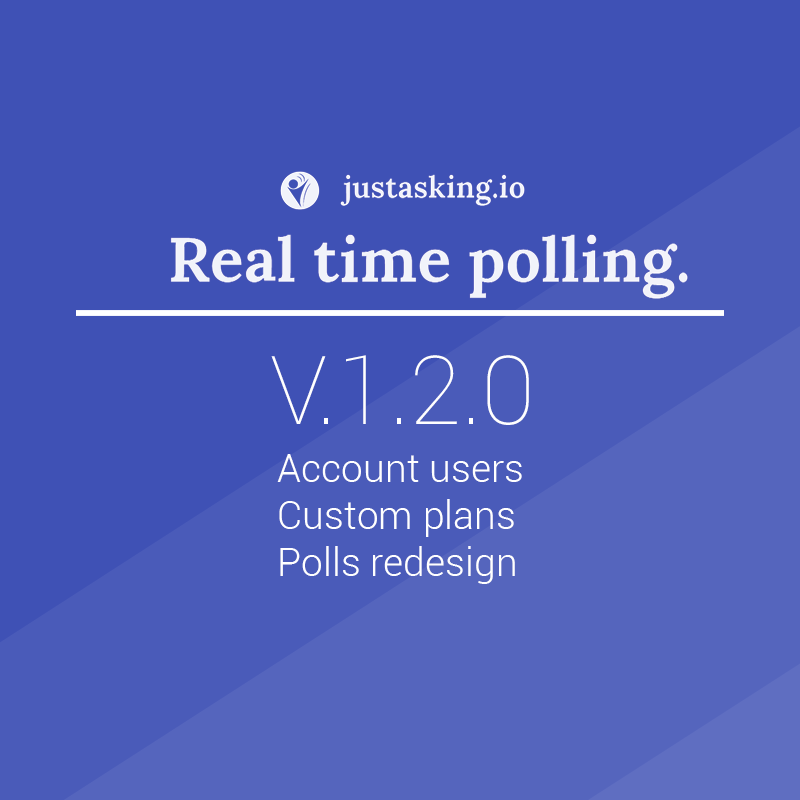
<style>
.page{position:relative;width:800px;height:800px;background:#3f51b5}
.page>*{position:absolute;margin:0}
.t1{font:95.2px "Roboto-Thin";color:#ffffff}
.t2{font:39.2px "Roboto-Light";color:#ffffff}
</style>
<div class="page">
<p class="t1" style="left:271px;top:355px;width:258px;height:70px">V.1.2.0</p>
<p class="t2" style="left:277px;top:454px;width:245px;height:130px">Account users<br>Custom plans<br>Polls redesign</p>
</div>
